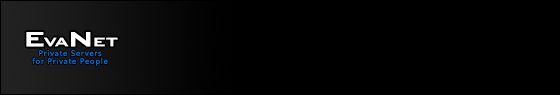
<style>
.page{position:relative;width:560px;height:95px;background:#000000}
.page>*{position:absolute;margin:0}
.t1{font:16.2px "BankGothicBT-Medium";letter-spacing:-0.075em;color:#ffffff;font-weight:bold;scale:1.11 1}
.t2{font:27px "BankGothicBT-Medium";letter-spacing:-0.075em;color:#ffffff;font-weight:bold;scale:1.11 1}
.t3{font:8px/8px "SegoeUI";letter-spacing:0.1em;color:#006dcf}
</style>
<div class="page">
<p class="t1" style="left:26px;top:32px;width:92px;height:15px"><span class="t2">E</span>VA<span class="t2">N</span>ET</p>
<p class="t3" style="left:32px;top:50px;width:76px;height:16px;text-align:center">Private Servers<br>for Private People</p>
</div>
